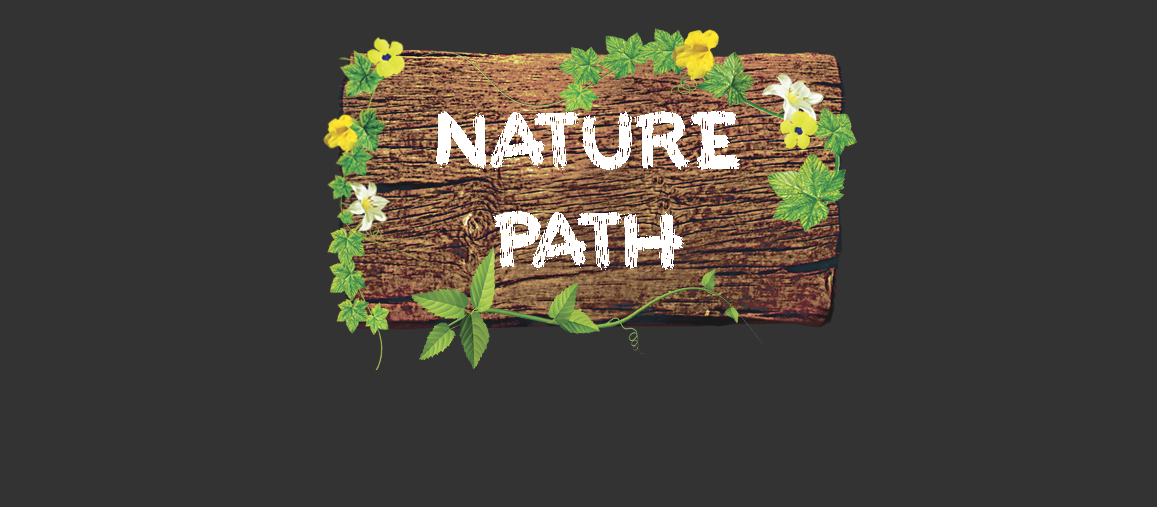
<style>
.page{position:relative;width:1157px;height:507px;background:#333333}
.page>*{position:absolute;margin:0}
.t1{font:83.3px "Paintthetown";color:#ffffff}
</style>
<div class="page">
<p class="t1" style="left:436px;top:111px;width:304px;height:159px;text-align:center">NATURE<br>PATH</p>
</div>
